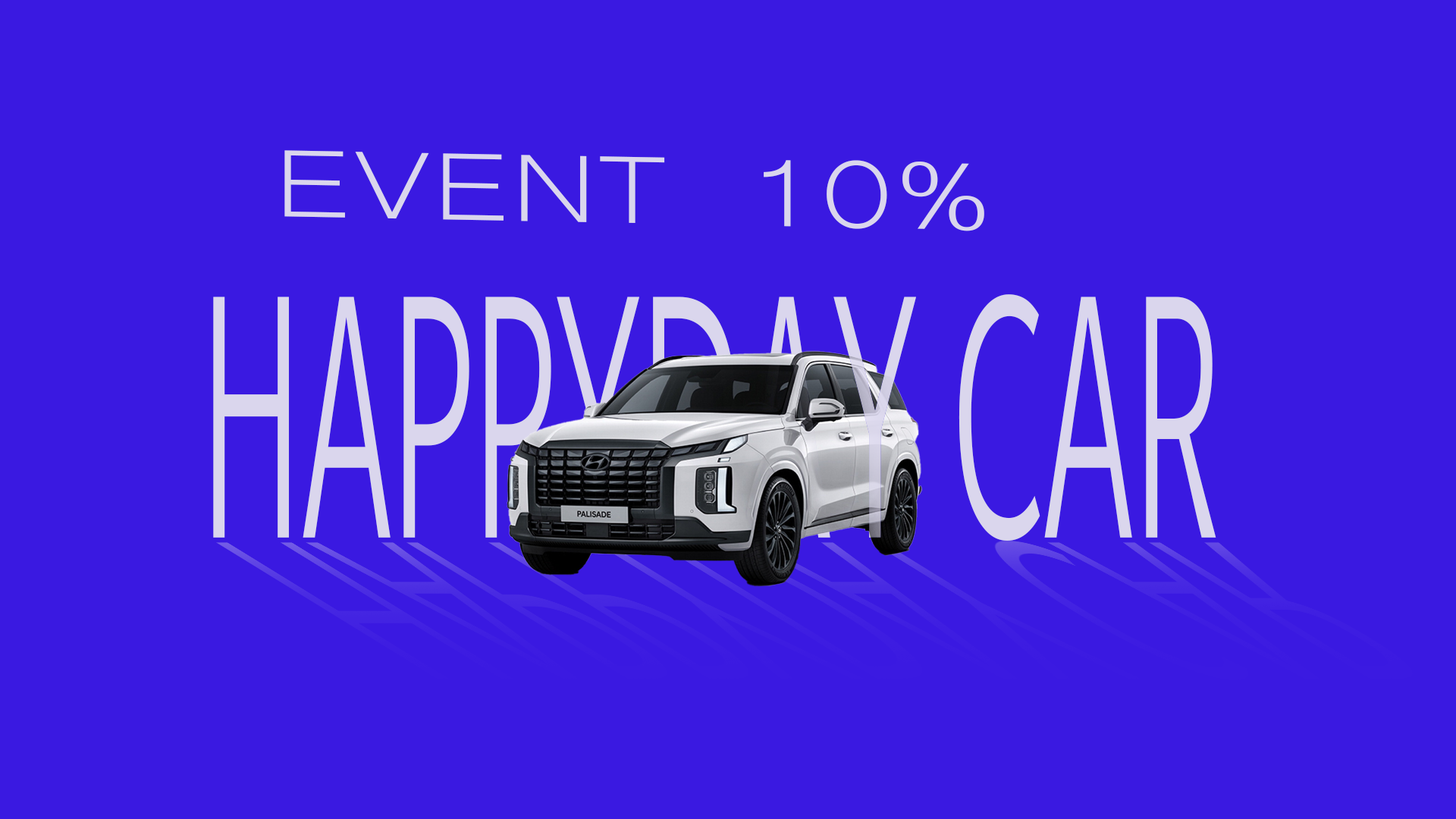
<style>
.page{position:relative;width:1456px;height:819px;background:#3a19e1}
.page>*{position:absolute;margin:0}
.t1{font:123.2px "Microsoft-Yi-Baiti";color:#dad6ed;scale:1.27 1}
.t2{font:318.5px "HancomGothicRegular";color:#dad6ed;scale:0.44 1}
</style>
<div class="page">
<p class="t1" style="left:284px;top:150px;width:700px;height:81px;rotate:1deg">EVENT 10%</p>
<p class="t2" style="left:213px;top:294px;width:1003px;height:247px">HAPPYDAY CAR</p>
</div>
